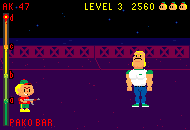
<style>
.page{position:relative;width:190px;height:130px;background:#32004b}
.page>*{position:absolute;margin:0}
.t1{font:8px "Standard0758";color:#ff0000}
.t2{font:8px "Standard0758";color:#ffff00}
</style>
<div class="page">
<p class="t1" style="left:3px;top:3px;width:26px;height:7px">AK 47</p>
<p class="t2" style="left:85px;top:3px;width:69px;height:7px">LEVEL 3  2560</p>
</div>
